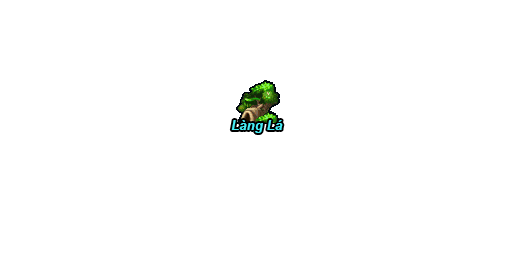
<style>
.page{position:relative;width:512px;height:256px;background:#ffffff}
.page>*{position:absolute;margin:0}
.t1{font:13.3px "Arial-BoldItalicMT";color:#48f0f8}
</style>
<div class="page">
<p class="t1" style="left:231px;top:120px;width:52px;height:13px">Làng Lá</p>
</div>
